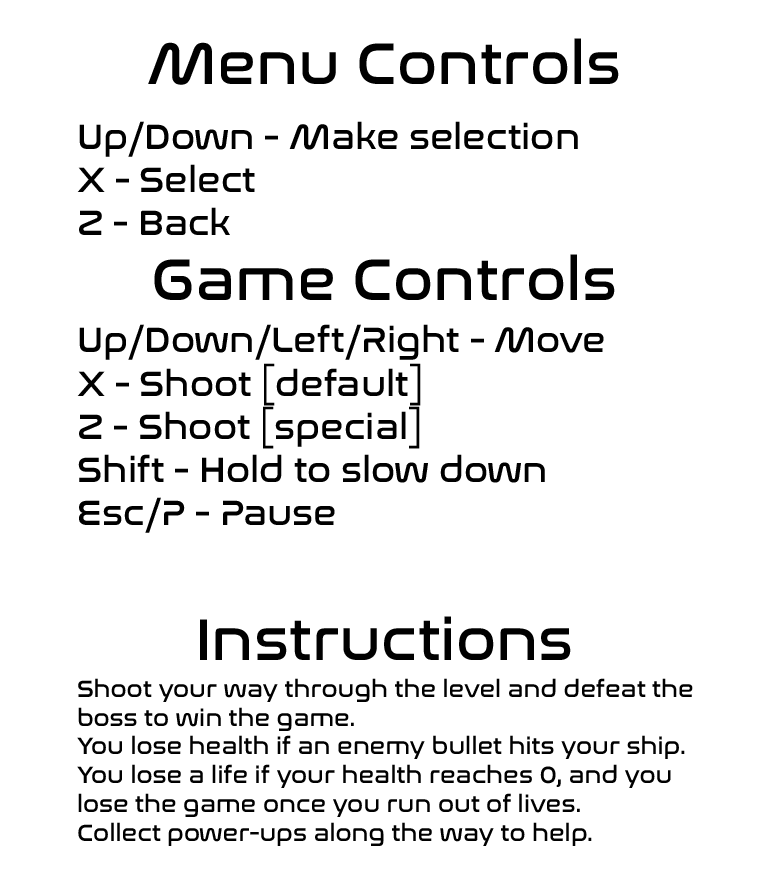
<style>
.page{position:relative;width:768px;height:896px;background:#ffffff}
.page>*{position:absolute;margin:0}
.t1{font:60px "NasalizationRg-Regular";color:#000000}
.t2{font:36px "NasalizationRg-Regular";color:#000000}
.t3{font:24px "NasalizationRg-Regular";color:#000000}
</style>
<div class="page">
<p class="t1" style="left:148px;top:38px;width:471px;height:622px;text-align:center">Menu Controls<br><br><br>Game Controls<br><br><br><br><br>Instructions</p>
<p class="t2" style="left:77px;top:121px;width:501px;height:114px">Up/Down - Make selection<br>X - Select<br>Z - Back</p>
<p class="t2" style="left:77px;top:324px;width:527px;height:209px">Up/Down/Left/Right - Move<br>X - Shoot [default]<br>Z - Shoot [special]<br>Shift - Hold to slow down<br>Esc/P - Pause</p>
<p class="t3" style="left:77px;top:678px;width:616px;height:168px">Shoot your way through the level and defeat the<br>boss to win the game.<br>You lose health if an enemy bullet hits your ship.<br>You lose a life if your health reaches 0, and you<br>lose the game once you run out of lives.<br>Collect power-ups along the way to help.</p>
</div>
